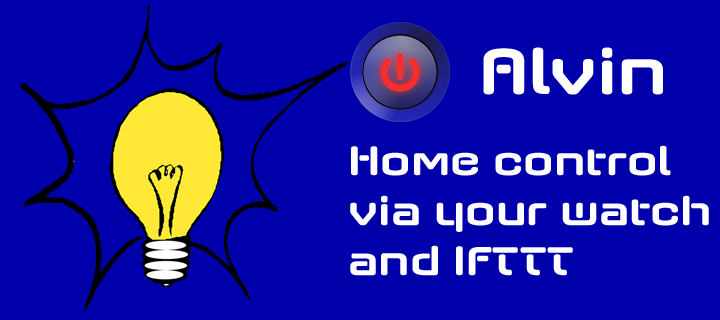
<style>
.page{position:relative;width:720px;height:320px;background:#0000aa}
.page>*{position:absolute;margin:0}
.t1{font:66.4px "AxaxaxRg-Bold";color:#ffffff}
.t2{font:41.5px "AxaxaxRg-Bold";color:#ffffff}
</style>
<div class="page">
<p class="t1" style="left:483px;top:47px;width:180px;height:48px">Alvin</p>
<p class="t2" style="left:350px;top:145px;width:359px;height:131px">Home control<br>via your watch<br>and IFTTT</p>
</div>
